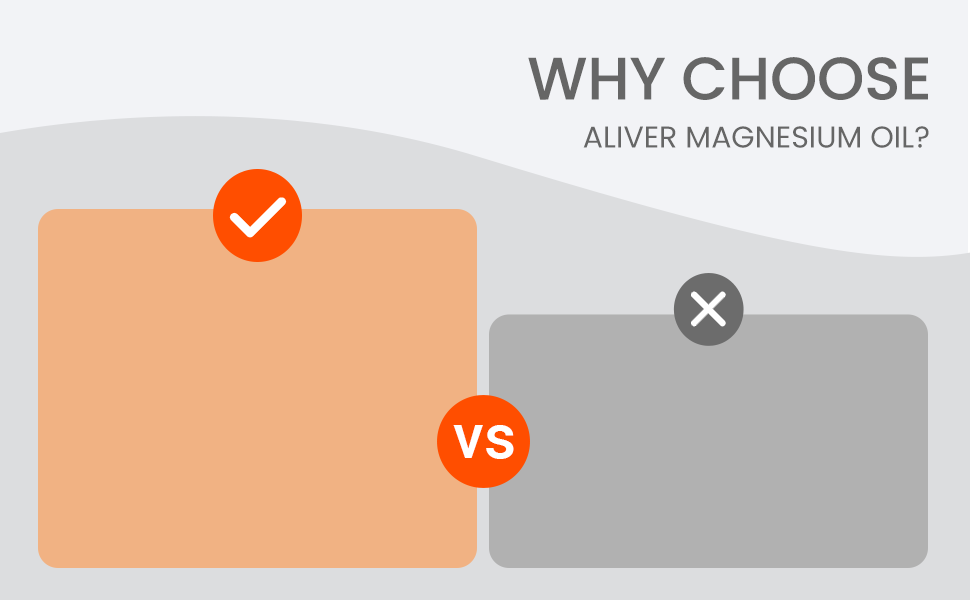
<style>
.page{position:relative;width:970px;height:600px;background:#f2f3f6}
.page>*{position:absolute;margin:0}
.t1{font:60px "Poppins-Medium";color:#666666}
.t2{font:30px "Poppins-Regular";color:#666666}
.t3{font:61.9px "Roboto-Medium";color:#ffffff}
</style>
<div class="page">
<p class="t1" style="left:528px;top:57px;width:400px;height:43px">WHY CHOOSE</p>
<p class="t2" style="left:583px;top:126px;width:346px;height:22px">ALIVER MAGNESIUM OIL?</p>
<p class="t3" style="left:453px;top:425px;width:61px;height:34px">vs</p>
</div>
